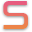
<style>
.page{position:relative;width:32px;height:32px;background:#ffffff}
.page>*{position:absolute;margin:0}
.t1{font:54.2px "ZektonRg-Regular"}
</style>
<div class="page">
<p class="t1" style="left:3px;top:1px;width:25px;height:28px">s</p>
</div>
